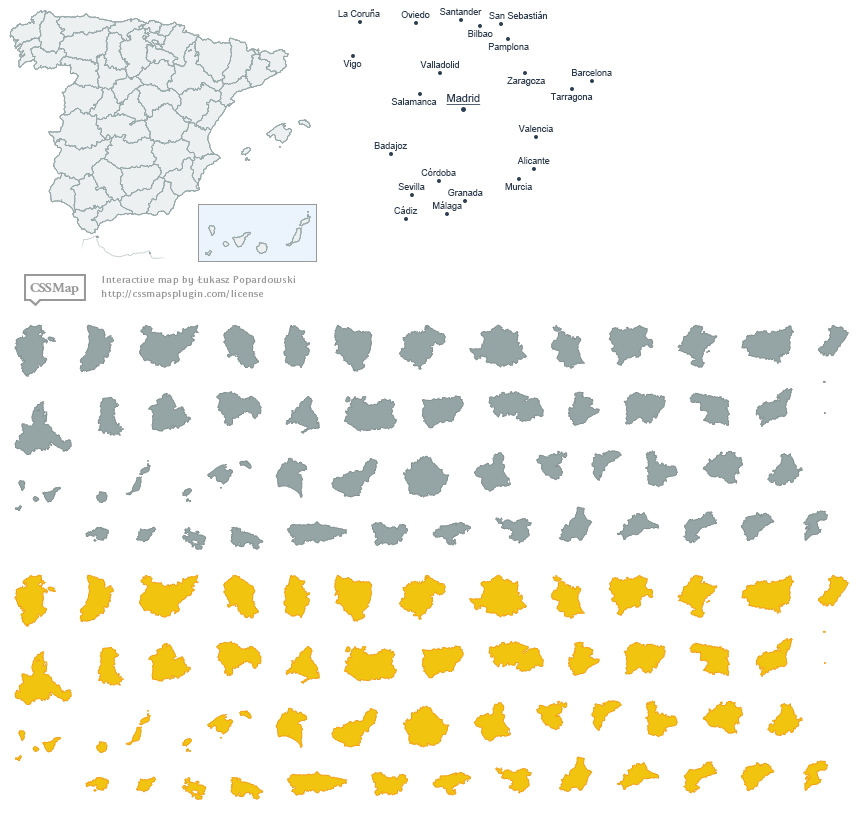
<style>
.page{position:relative;width:864px;height:815px;background:#ffffff}
.page>*{position:absolute;margin:0}
.t1{font:9px "ArialMT";color:#2c3e50}
.t2{font:11px "ArialMT";color:#2c3e50;text-decoration:underline}
</style>
<div class="page">
<p class="t1" style="left:338px;top:9px;width:42px;height:8px">La Coruña</p>
<p class="t1" style="left:401px;top:11px;width:29px;height:7px">Oviedo</p>
<p class="t1" style="left:440px;top:8px;width:42px;height:7px">Santander</p>
<p class="t1" style="left:489px;top:11px;width:58px;height:8px">San Sebastián</p>
<p class="t1" style="left:468px;top:30px;width:25px;height:7px">Bilbao</p>
<p class="t1" style="left:488px;top:43px;width:41px;height:9px">Pamplona</p>
<p class="t1" style="left:343px;top:60px;width:19px;height:9px">Vigo</p>
<p class="t1" style="left:420px;top:61px;width:39px;height:7px">Valladolid</p>
<p class="t1" style="left:507px;top:77px;width:38px;height:9px">Zaragoza</p>
<p class="t1" style="left:572px;top:69px;width:40px;height:7px">Barcelona</p>
<p class="t1" style="left:391px;top:98px;width:46px;height:7px">Salamanca</p>
<p class="t2" style="left:446px;top:94px;width:35px;height:11px">Madrid</p>
<p class="t1" style="left:550px;top:93px;width:43px;height:9px">Tarragona</p>
<p class="t1" style="left:518px;top:125px;width:35px;height:7px">Valencia</p>
<p class="t1" style="left:374px;top:142px;width:33px;height:9px">Badajoz</p>
<p class="t1" style="left:517px;top:157px;width:33px;height:7px">Alicante</p>
<p class="t1" style="left:421px;top:168px;width:35px;height:8px">Córdoba</p>
<p class="t1" style="left:398px;top:183px;width:27px;height:7px">Sevilla</p>
<p class="t1" style="left:505px;top:183px;width:27px;height:7px">Murcia</p>
<p class="t1" style="left:448px;top:189px;width:35px;height:7px">Granada</p>
<p class="t1" style="left:394px;top:206px;width:24px;height:8px">Cádiz</p>
<p class="t1" style="left:433px;top:201px;width:29px;height:10px">Málaga</p>
</div>
